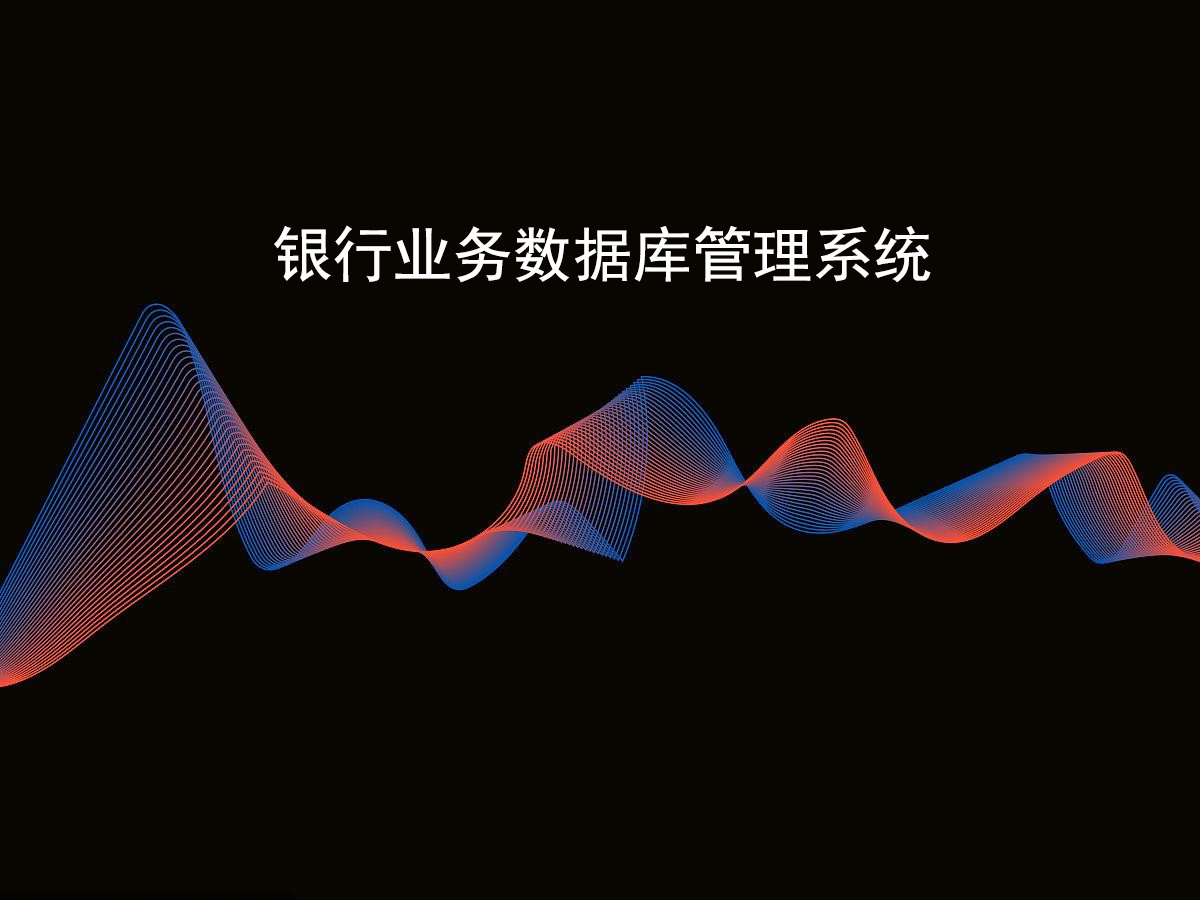
<style>
.page{position:relative;width:1200px;height:900px;background:#090601}
.page>*{position:absolute;margin:0}
.t1{font:60px "SimHei";color:#fffefe}
</style>
<div class="page">
<p class="t1" style="left:274px;top:225px;width:657px;height:58px">银行业务数据库管理系统</p>
</div>
